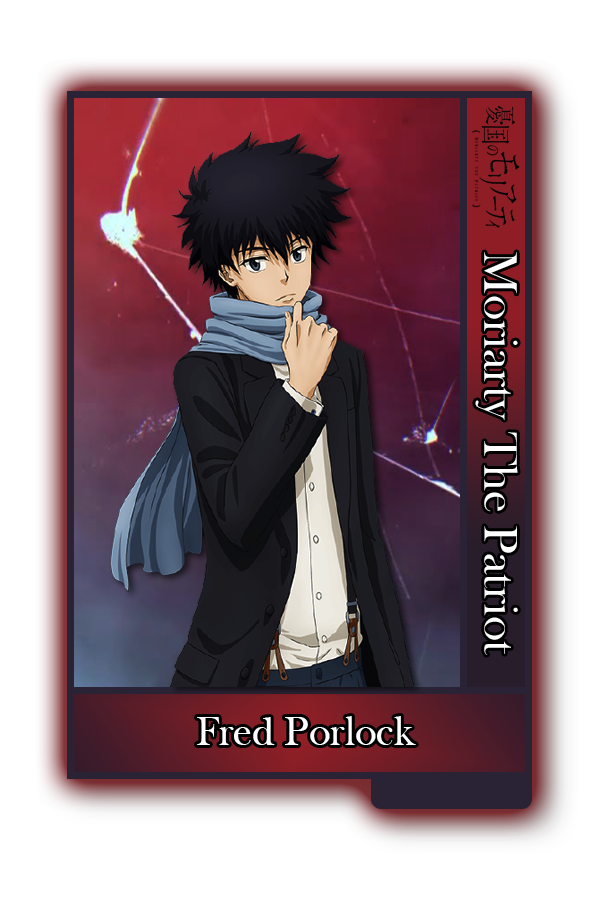
<style>
.page{position:relative;width:600px;height:900px;background:#ffffff}
.page>*{position:absolute;margin:0}
.t1{font:48.8px "BaskOldFace";color:#ffffff}
.t2{font:41.7px "BaskOldFace";color:#ffffff}
</style>
<div class="page">
<p class="t1" style="left:475px;top:252px;width:43px;height:403px;rotate:90deg">Moriarty The Patriot</p>
<p class="t2" style="left:197px;top:716px;width:219px;height:29px">Fred Porlock</p>
</div>
